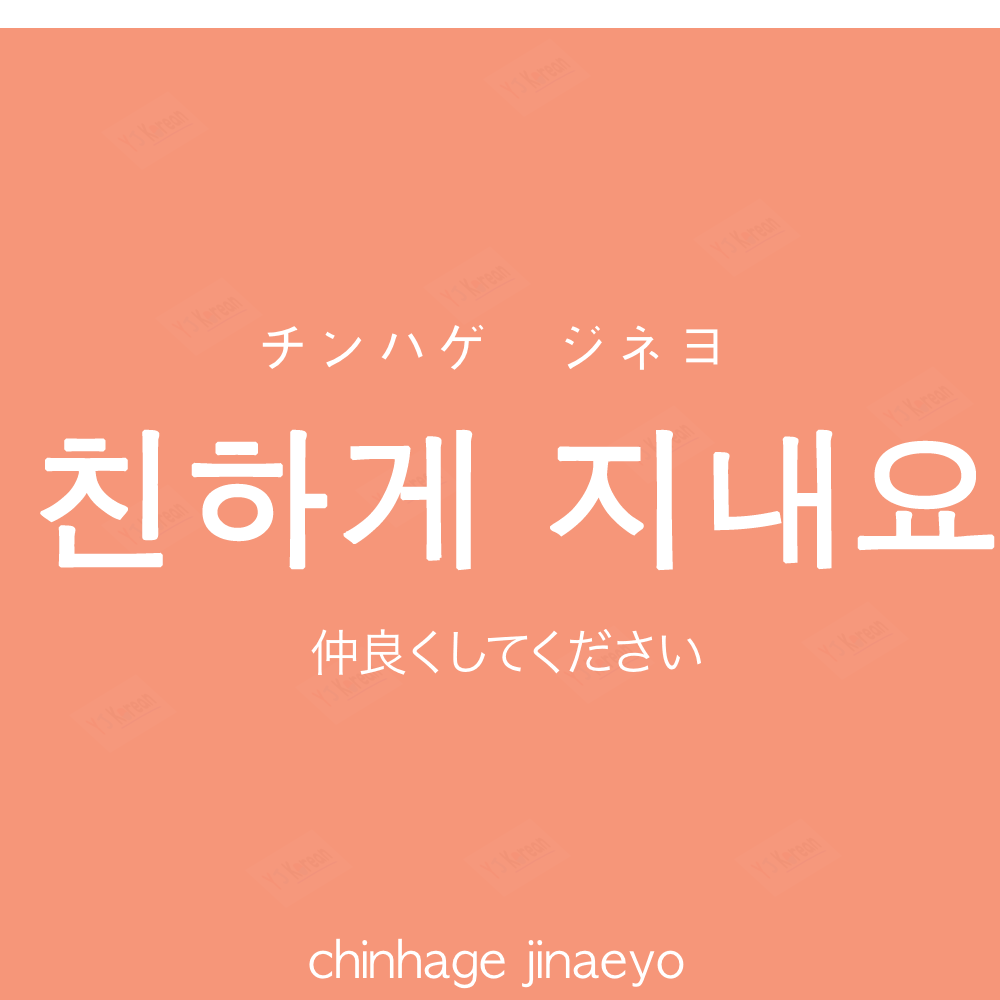
<style>
.page{position:relative;width:1000px;height:1000px;background:#f69679}
.page>*{position:absolute;margin:0}
.t1{font:60px "AppleGothic";color:#ffffff}
.t2{font:150px "AppleGothic";color:#ffffff;font-weight:bold}
.t3{font:50px "HiraKakuProN-W3";color:#ffffff}
.t4{font:50px "AppleGothic";color:#ffffff}
</style>
<div class="page">
<p class="t1" style="left:262px;top:324px;width:456px;height:46px">チンハゲ　ジネヨ</p>
<p class="t2" style="left:40px;top:429px;width:955px;height:142px">친하게 지내요</p>
<p class="t3" style="left:311px;top:629px;width:390px;height:46px">仲良くしてください</p>
<p class="t4" style="left:309px;top:938px;width:375px;height:51px">chinhage jinaeyo</p>
</div>
